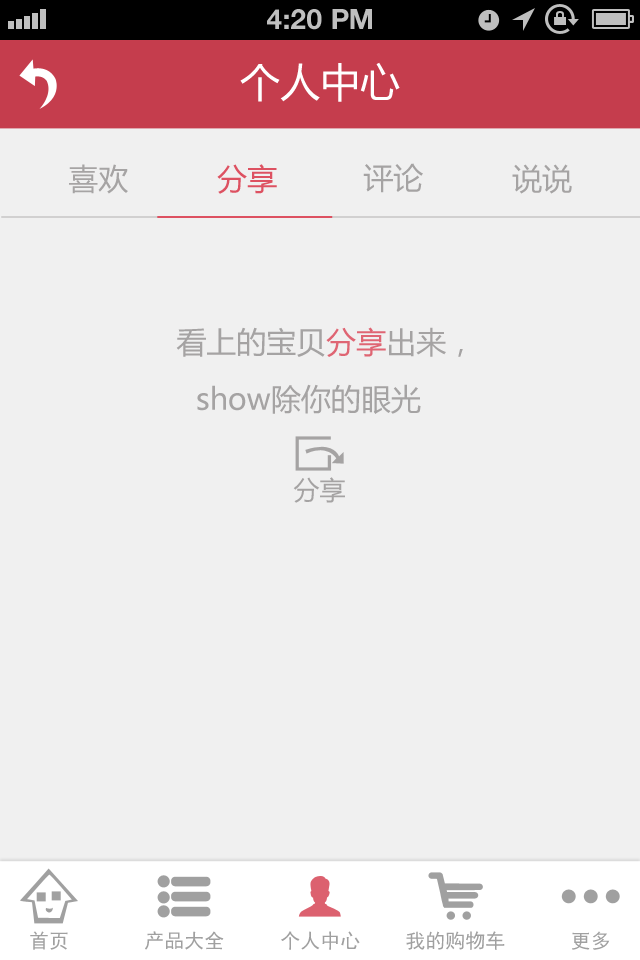
<style>
.page{position:relative;width:640px;height:960px;background:#f0f0f0}
.page>*{position:absolute;margin:0}
.t1{font:28px "HelveticaNeue-Bold";color:#bfbfbf;text-transform:uppercase}
.t2{font:40px "MicrosoftYaHei";color:#ffffff;text-transform:uppercase}
.t3{font:30px "MicrosoftYaHei";color:#a6a4a4;text-transform:uppercase}
.t4{font:30px "MicrosoftYaHei";color:#dd5161;text-transform:uppercase}
.t5{font:30px "MicrosoftYaHei";color:#a5a3a3;text-transform:uppercase}
.t6{font:30px/57px "MicrosoftYaHei";color:#a5a3a3}
.t7{font:30px/57px "MicrosoftYaHei";color:#df6573}
.t8{font:26px "MicrosoftYaHei";color:#a5a3a3;text-transform:uppercase}
.t9{font:20px "SimHei";color:#a0a0a0}
</style>
<div class="page">
<p class="t1" style="left:267px;top:9px;width:105px;height:21px">4:20 PM</p>
<p class="t2" style="left:240px;top:62px;width:160px;height:40px">个人中心</p>
<p class="t3" style="left:69px;top:164px;width:59px;height:30px">喜欢</p>
<p class="t4" style="left:217px;top:164px;width:60px;height:30px">分享</p>
<p class="t5" style="left:363px;top:163px;width:60px;height:30px">评论</p>
<p class="t5" style="left:512px;top:164px;width:60px;height:30px">说说</p>
<p class="t6" style="left:176px;top:327px;width:287px;height:87px;text-align:center">看上的宝贝<span class="t7">分享</span>出来，<br>show除你的眼光</p>
<p class="t8" style="left:293px;top:477px;width:52px;height:26px">分享</p>
<p class="t9" style="left:30px;top:931px;width:38px;height:19px">首页</p>
<p class="t9" style="left:145px;top:931px;width:79px;height:19px">产品大全</p>
<p class="t9" style="left:281px;top:931px;width:79px;height:19px">个人中心</p>
<p class="t9" style="left:406px;top:931px;width:99px;height:19px">我的购物车</p>
<p class="t9" style="left:572px;top:931px;width:38px;height:19px">更多</p>
</div>
